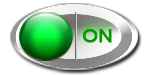
<style>
.page{position:relative;width:150px;height:75px;background:#ffffff}
.page>*{position:absolute;margin:0}
.t1{font:18px "ArialMT";color:#009900;font-weight:bold;scale:1.1 1}
</style>
<div class="page">
<p class="t1" style="left:82px;top:29px;width:30px;height:14px">ON</p>
</div>
